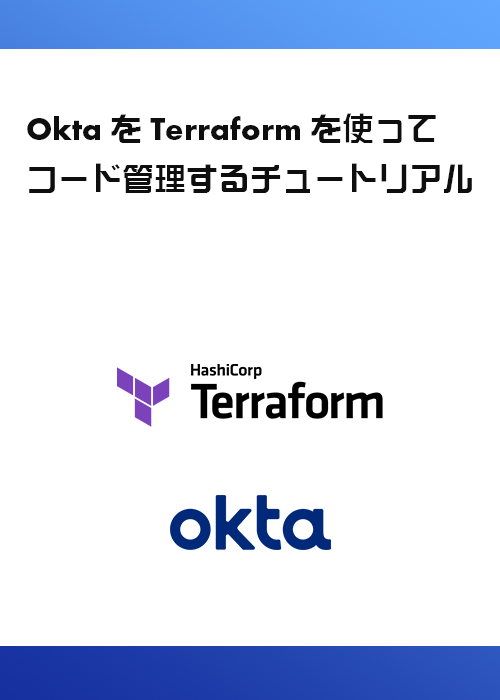
<style>
.page{position:relative;width:500px;height:700px;background:#ffffff}
.page>*{position:absolute;margin:0}
.t1{font:32px/50px "Futura-Bol";color:#0e0e0e}
.t2{font:32px/50px "DFSoGei-W7-WINP-RKSJ-H";color:#0e0e0e}
.t3{font:32px/50px "DFSoGei-W5-WINP-RKSJ-H";color:#0e0e0e}
</style>
<div class="page">
<p class="t1" style="left:27px;top:113px;width:445px;height:80px">Okta<span class="t2">を</span>Terraform<span class="t2">を</span><span class="t3">使</span><span class="t2">って<br>コード</span><span class="t3">管理</span><span class="t2">するチュートリアル</span></p>
</div>
